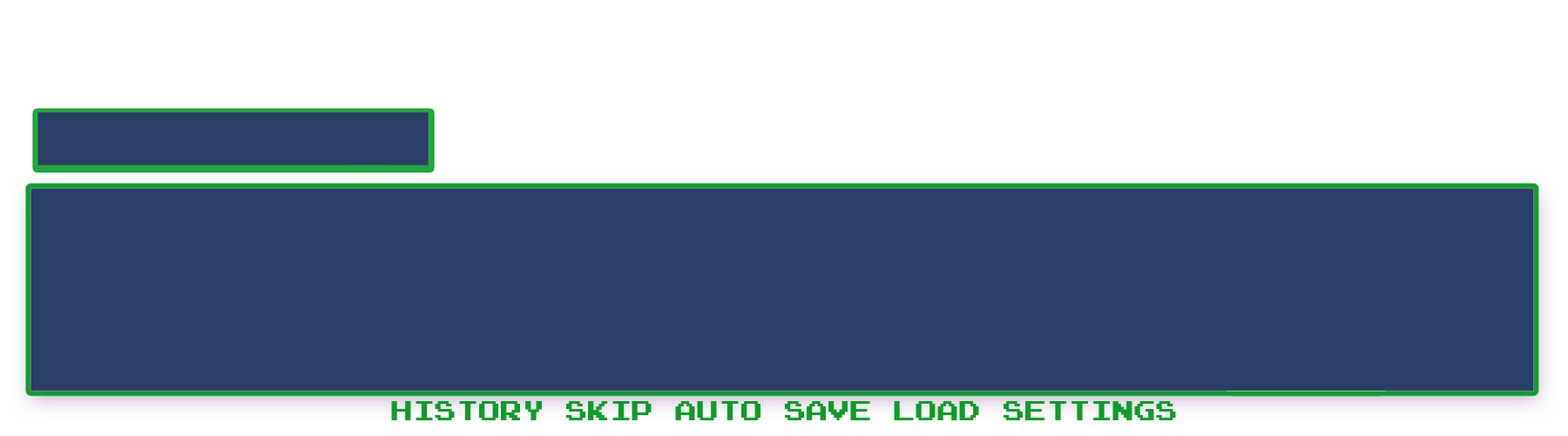
<style>
.page{position:relative;width:1568px;height:436px;background:#2b3e65}
.page>*{position:absolute;margin:0}
.t1{font:22.3px "ArcadeNormal";color:#0c9d28}
</style>
<div class="page">
<p class="t1" style="left:391px;top:401px;width:785px;height:19px">history skip auto save load settings</p>
</div>
